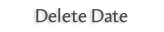
<style>
.page{position:relative;width:164px;height:32px;background:#ffffff}
.page>*{position:absolute;margin:0}
.t1{font:18.7px "Amira-Roman";color:#474747}
</style>
<div class="page">
<p class="t1" style="left:36px;top:8px;width:92px;height:15px">Delete Date</p>
</div>
